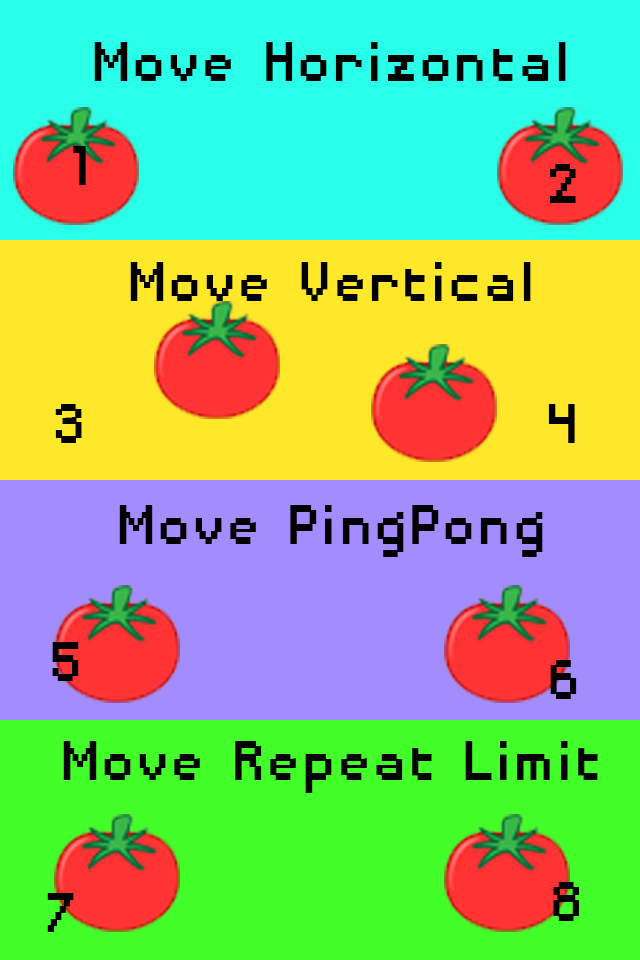
<style>
.page{position:relative;width:640px;height:960px;background:#a38dfe}
.page>*{position:absolute;margin:0}
.t1{font:72.6px "DisposableDroidBB";color:#010101}
</style>
<div class="page">
<p class="t1" style="left:94px;top:42px;width:472px;height:39px">Move Horizontal</p>
<p class="t1" style="left:73px;top:146px;width:13px;height:39px">1</p>
<p class="t1" style="left:549px;top:164px;width:27px;height:39px">2</p>
<p class="t1" style="left:130px;top:262px;width:401px;height:39px">Move Vertical</p>
<p class="t1" style="left:55px;top:404px;width:27px;height:39px">3</p>
<p class="t1" style="left:548px;top:404px;width:27px;height:39px">4</p>
<p class="t1" style="left:119px;top:505px;width:424px;height:52px">Move PingPong</p>
<p class="t1" style="left:52px;top:642px;width:27px;height:39px">5</p>
<p class="t1" style="left:550px;top:660px;width:27px;height:39px">6</p>
<p class="t1" style="left:63px;top:741px;width:535px;height:52px">Move Repeat Limit</p>
<p class="t1" style="left:47px;top:893px;width:27px;height:39px">7</p>
<p class="t1" style="left:553px;top:882px;width:26px;height:39px">8</p>
</div>
